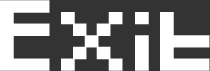
<style>
.page{position:relative;width:210px;height:71px;background:#333333}
.page>*{position:absolute;margin:0}
.t1{font:58.1px "Pixeled";color:#ffffff;font-weight:bold}
</style>
<div class="page">
<p class="t1" style="left:0px;top:0px;width:210px;height:71px">Exit</p>
</div>
